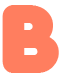
<style>
.page{position:relative;width:60px;height:80px;background:#ff7e5f}
.page>*{position:absolute;margin:0}
.t1{font:91.3px "Valken";color:#ff7e5f}
</style>
<div class="page">
<p class="t1" style="left:2px;top:5px;width:57px;height:68px">B</p>
</div>
